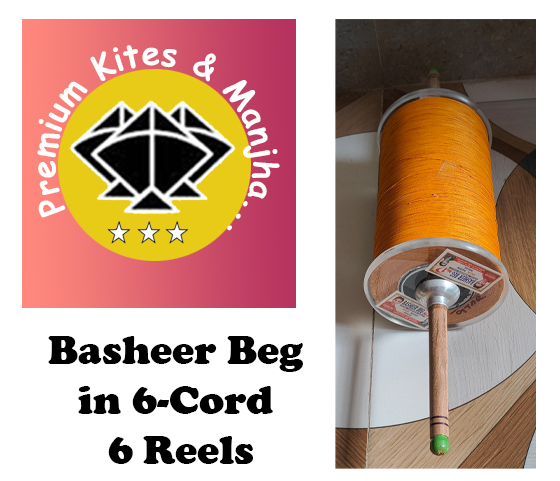
<style>
.page{position:relative;width:560px;height:481px;background:#ffffff}
.page>*{position:absolute;margin:0}
.t1{font:41.7px "CooperBlack";color:#000000}
</style>
<div class="page">
<p class="t1" style="left:48px;top:336px;width:255px;height:128px;text-align:center">Basheer Beg<br>in 6-Cord<br> 6 Reels</p>
</div>
